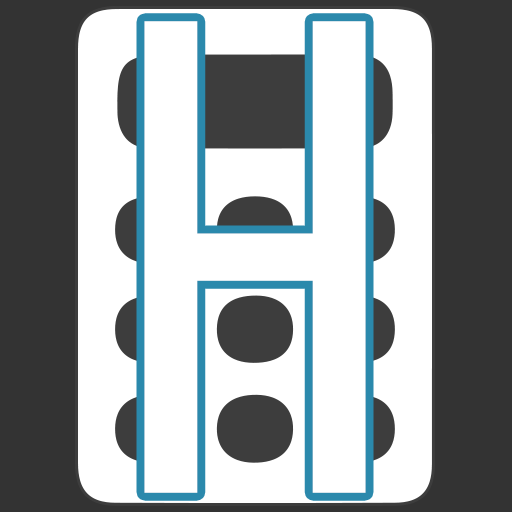
<style>
.page{position:relative;width:512px;height:512px;background:#ffffff}
.page>*{position:absolute;margin:0}
.t1{font:673.1px "BebasNeueRegular";color:#ffffff}
</style>
<div class="page">
<p class="t1" style="left:144px;top:21px;width:222px;height:472px">H</p>
</div>
